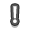
<style>
.page{position:relative;width:30px;height:30px;background:#ffffff}
.page>*{position:absolute;margin:0}
.t1{font:23.5px "PingFangHK-Semibold";color:#ffffff;text-transform:uppercase}
</style>
<div class="page">
<p class="t1" style="left:13px;top:6px;width:4px;height:17px">!</p>
</div>
